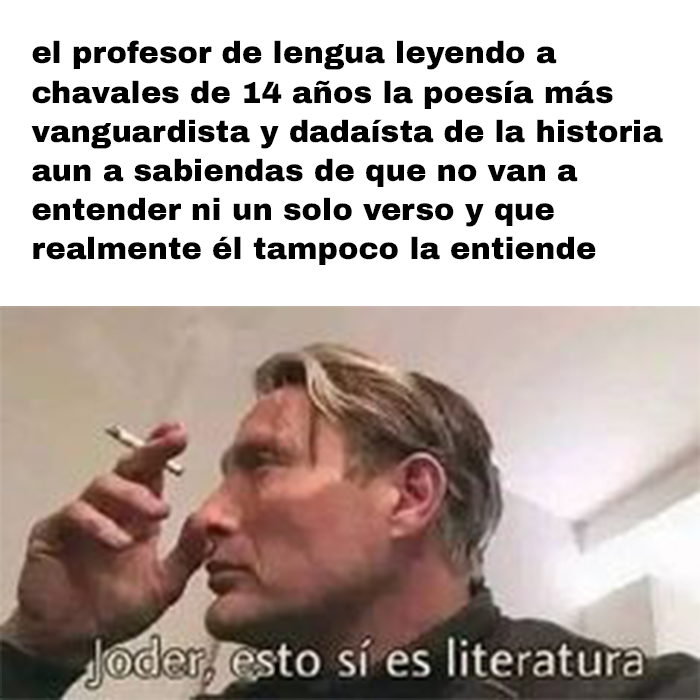
<style>
.page{position:relative;width:700px;height:700px;background:#ffffff}
.page>*{position:absolute;margin:0}
.t1{font:30.6px "ArchivoBlack-Regular";color:#000000}
</style>
<div class="page">
<p class="t1" style="left:31px;top:40px;width:632px;height:225px">el profesor de lengua leyendo a<br>chavales de 14 años la poesía más<br>vanguardista y dadaísta de la historia<br>aun a sabiendas de que no van a<br>entender ni un solo verso y que<br>realmente él tampoco la entiende</p>
</div>
